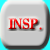
<style>
.page{position:relative;width:50px;height:50px;background:#c8c8c8}
.page>*{position:absolute;margin:0}
.t1{font:14px "MyungjoXB-HM"}
</style>
<div class="page">
<p class="t1" style="left:8px;top:18px;width:34px;height:12px">INSP.</p>
</div>
